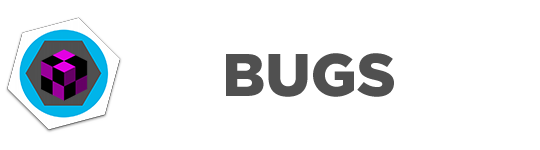
<style>
.page{position:relative;width:540px;height:150px;background:#ffffff}
.page>*{position:absolute;margin:0}
.t1{font:60px "GothamPro-Black";color:#505050}
</style>
<div class="page">
<p class="t1" style="left:226px;top:53px;width:168px;height:44px">BUGS</p>
</div>
